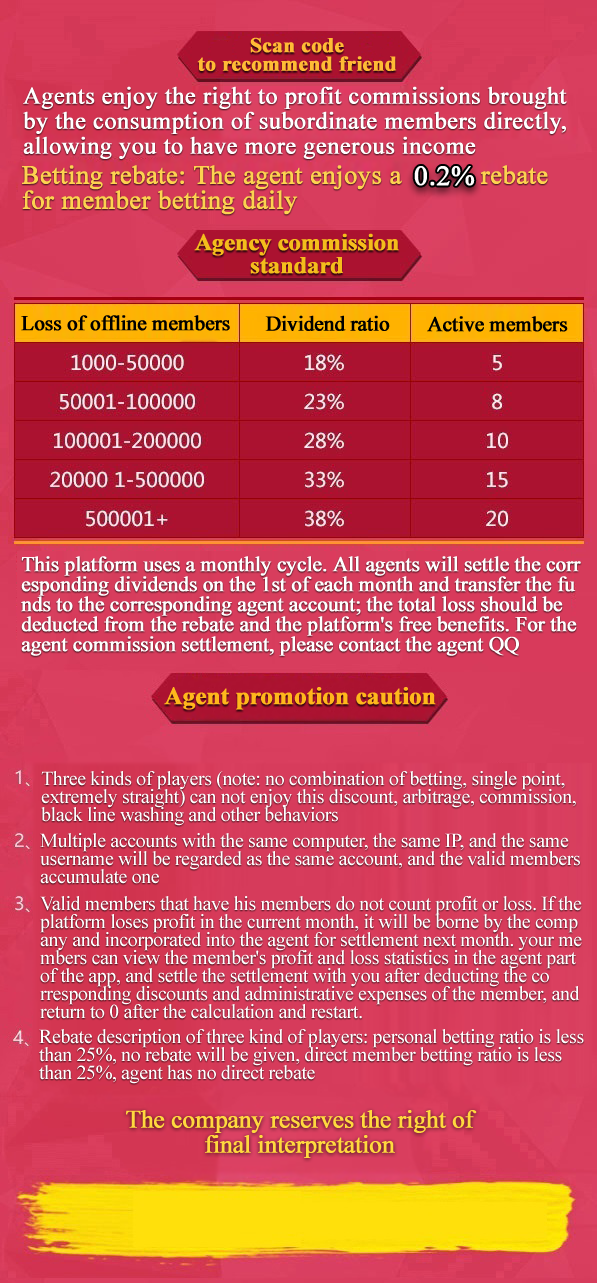
<style>
.page{position:relative;width:597px;height:1283px}
.page>*{position:absolute;margin:0}
.t1{font:21px/60.5px "TimesNewRomanPS-BoldMT";color:#ffbb35;font-weight:bold}
.t2{font:26px/25px "TimesNewRomanPSMT";color:#fdd250;font-weight:bold}
.t3{font:28px "TimesNewRomanPSMT";color:#ffffff;font-weight:bold}
.t4{font:24px/23px "TimesNewRomanPS-BoldMT";letter-spacing:-0.02em;color:#f4bd1c;font-weight:bold}
.t5{font:21px "TimesNewRomanPSMT";letter-spacing:-0.02em;color:#000000;font-weight:bold}
.t6{font:21px/20px "TimesNewRomanPSMT";letter-spacing:-0.02em;color:#ffffff;font-weight:bold}
.t7{font:25px "TimesNewRomanPS-BoldMT";letter-spacing:-0.02em;color:#ffb71c;font-weight:bold}
.t8{font:20px/18px "TimesNewRomanPSMT";letter-spacing:-0.02em;color:#ffffff}
.t9{font:25px/25px "TimesNewRomanPSMT";letter-spacing:-0.02em;color:#ffd93e;font-weight:bold}
</style>
<div class="page">
<p class="t1" style="left:197px;top:37px;width:200px;height:34px;text-align:center">Scan code <br>to recommend friend</p>
<p class="t2" style="left:22px;top:165px;width:526px;height:50px">Betting rebate: The agent enjoys a           rebate <br>for member betting daily</p>
<p class="t3" style="left:414px;top:166px;width:61px;height:20px">0.2%</p>
<p class="t4" style="left:194px;top:233px;width:205px;height:41px;text-align:center">Agency commission <br>standard</p>
<p class="t5" style="left:21px;top:315px;width:209px;height:16px">Loss of offline members</p>
<p class="t5" style="left:265px;top:315px;width:125px;height:16px">Dividend ratio</p>
<p class="t5" style="left:427px;top:316px;width:141px;height:16px">Active members</p>
<p class="t6" style="left:21px;top:556px;width:560px;height:100px">This platform uses a monthly cycle. All agents will settle the corr<br>esponding dividends on the 1st of each month and transfer the fu<br>nds to the corresponding agent account; the total loss should be <br>deducted from the rebate and the platform's free benefits. For the <br>agent commission settlement, please contact the agent QQ</p>
<p class="t7" style="left:164px;top:687px;width:272px;height:23px">Agent promotion caution</p>
<p class="t8" style="left:41px;top:771px;width:535px;height:55px">Three kinds of players (note: no combination of betting, single point, <br>extremely straight) can not enjoy this discount, arbitrage, commission,<br>black line washing and other behaviors</p>
<p class="t8" style="left:40px;top:833px;width:540px;height:51px">Multiple accounts with the same computer, the same IP, and the same <br>username will be regarded as the same account, and the valid members<br>accumulate one</p>
<p class="t8" style="left:40px;top:896px;width:542px;height:123px">Valid members that have his members do not count profit or loss. If the<br>platform loses profit in the current month, it will be borne by the comp<br>any and incorporated into the agent for settlement next month. your me<br>mbers can view the member's profit and loss statistics in the agent part <br>of the app, and settle the settlement with you after deducting the co<br>rresponding discounts and administrative expenses of the member, and <br>return to 0 after the calculation and restart.</p>
<p class="t8" style="left:39px;top:1029px;width:545px;height:55px">Rebate description of three kind of players: personal betting ratio is less <br>than 25%, no rebate will be given, direct member betting ratio is less <br>than 25%, agent has no direct rebate</p>
<p class="t9" style="left:126px;top:1110px;width:351px;height:48px;text-align:center">The company reserves the right of <br>final interpretation</p>
</div>
